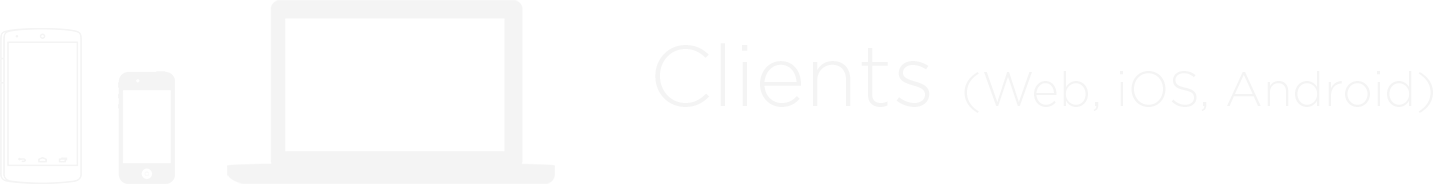
<style>
.page{position:relative;width:1433px;height:184px;background:#ffffff}
.page>*{position:absolute;margin:0}
.t1{font:48px "Gotham-Light";color:#f4f4f4}
.t2{font:86px "Gotham-Light";color:#f4f4f4}
</style>
<div class="page">
<p class="t1" style="left:655px;top:43px;width:778px;height:70px"><span class="t2">Clients </span>(Web, iOS, Android)</p>
</div>
